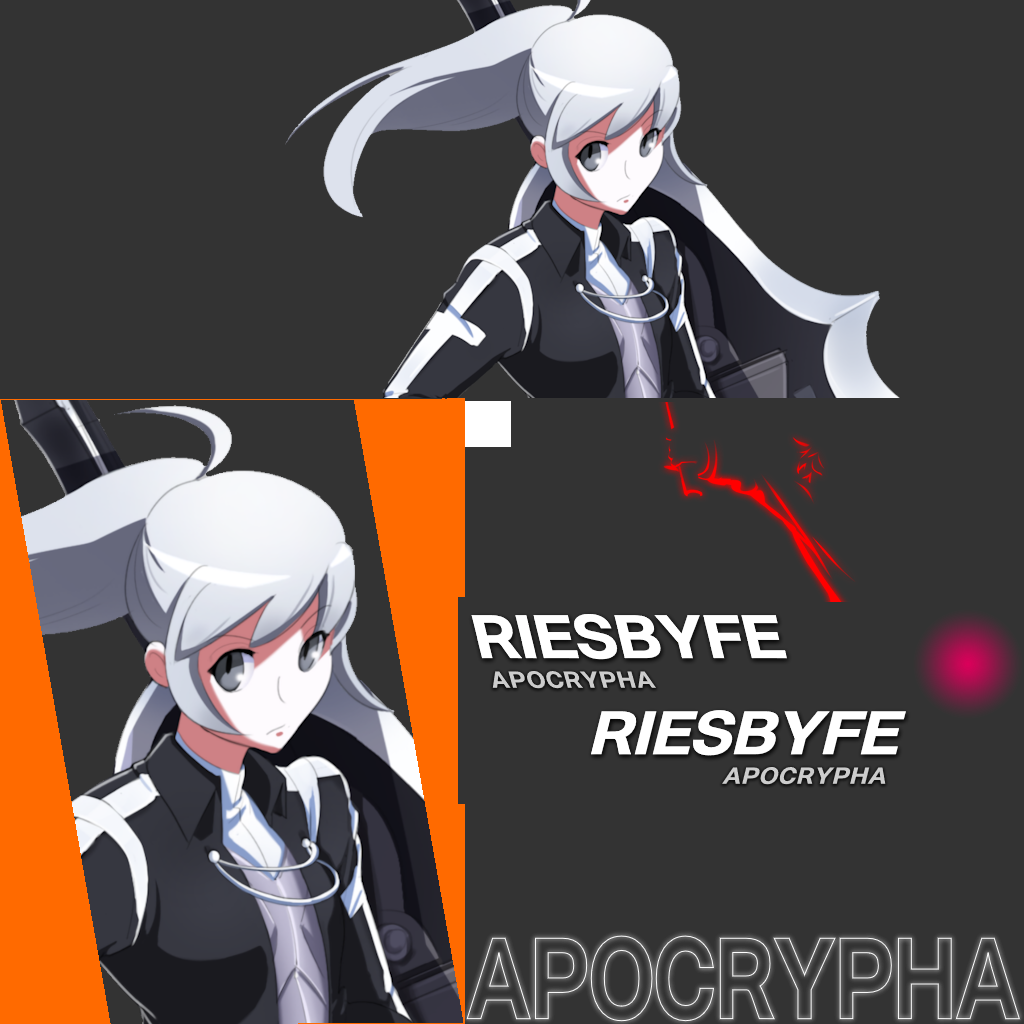
<style>
.page{position:relative;width:1024px;height:1024px;background:#333333}
.page>*{position:absolute;margin:0}
.t1{font:56.6px "NewCezannePro-B";letter-spacing:-0.021em;color:#ffffff;font-weight:bold}
.t2{font:21.8px "NewCezannePro-B";letter-spacing:0.02em;color:#cccccc;text-transform:uppercase;font-weight:bold;scale:0.96 1}
.t3{font:56.7px "NewCezannePro-B";letter-spacing:-0.021em;color:#ffffff;font-weight:bold;scale:0.97 1}
.t4{font:21.7px "NewCezannePro-B";letter-spacing:0.02em;color:#cccccc;text-transform:uppercase;font-weight:bold;scale:0.97 1}
.t5{font:103px "NewCezannePro-B";letter-spacing:-0.012em;color:#ffffff;text-transform:uppercase;scale:0.74 1}
</style>
<div class="page">
<p class="t1" style="left:471px;top:613px;width:316px;height:47px">RIESBYFE</p>
<p class="t1" style="left:471px;top:613px;width:316px;height:47px">RIESBYFE</p>
<p class="t2" style="left:492px;top:671px;width:164px;height:18px">Apocrypha</p>
<p class="t3" style="left:591px;top:710px;width:315px;height:46px">RIESBYFE</p>
<p class="t3" style="left:591px;top:710px;width:315px;height:46px">RIESBYFE</p>
<p class="t4" style="left:721px;top:766px;width:165px;height:19px">Apocrypha</p>
<p class="t5" style="left:466px;top:935px;width:555px;height:87px">APOCRYPHA</p>
</div>
